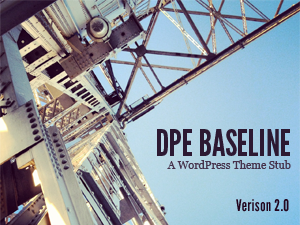
<style>
.page{position:relative;width:300px;height:225px}
.page>*{position:absolute;margin:0}
.t1{font:11px "Georgia";letter-spacing:-0.007em;color:#45324b}
.t2{font:36px "LeagueGothic";color:#2c1932}
.t3{font:16px "LeagueGothic";letter-spacing:0.025em;color:#22061f}
</style>
<div class="page">
<p class="t1" style="left:157px;top:129px;width:134px;height:40px;text-align:right"><span class="t2">DPE BASELINE<br></span>A WordPress Theme Stub</p>
<p class="t3" style="left:236px;top:199px;width:53px;height:13px">Verison 2.0</p>
</div>
